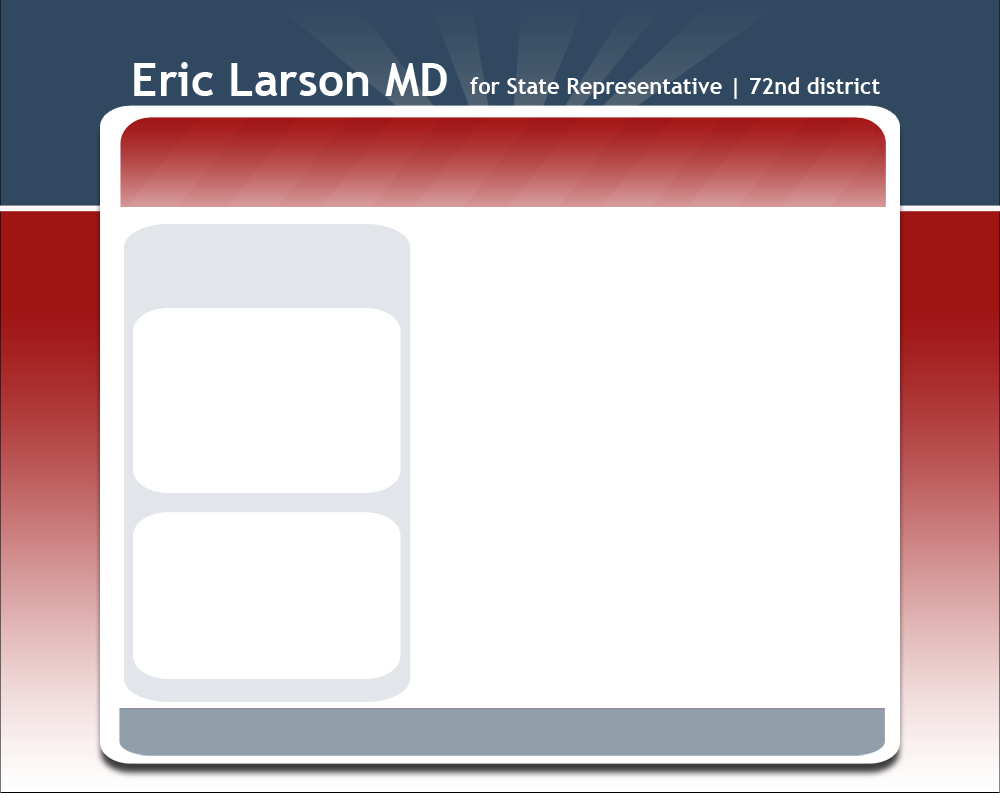
<style>
.page{position:relative;width:1000px;height:800px;background:#ffffff}
.page>*{position:absolute;margin:0}
.t1{font:46px "TrebuchetMS-Bold";color:#ffffff}
.t2{font:22px "TrebuchetMS-Bold";color:#ffffff}
</style>
<div class="page">
<p class="t1" style="left:134px;top:62px;width:313px;height:34px">Eric Larson MD</p>
<p class="t2" style="left:470px;top:77px;width:410px;height:22px">for State Representative | 72nd district</p>
</div>
